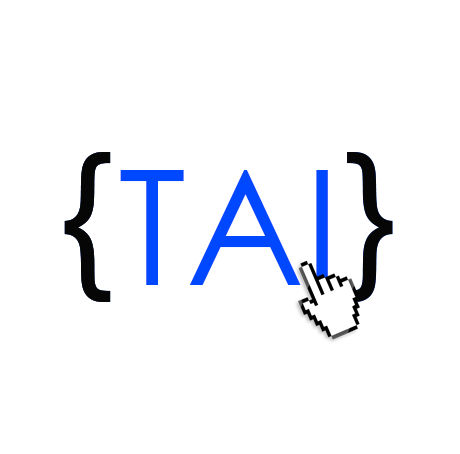
<style>
.page{position:relative;width:460px;height:454px;background:#ffffff}
.page>*{position:absolute;margin:0}
.t1{font:160px "CenturyGothic";color:#0048ff}
</style>
<div class="page">
<p class="t1" style="left:120px;top:170px;width:208px;height:115px">TAI</p>
</div>
